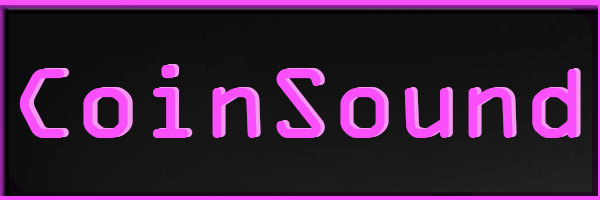
<style>
.page{position:relative;width:600px;height:200px}
.page>*{position:absolute;margin:0}
.t1{font:106px "OCRAExtended";color:#f950fb}
.t2{font:106px "OCRAExtended"}
</style>
<div class="page">
<p class="t1" style="left:19px;top:65px;width:558px;height:73px">CoinSound</p>
<p class="t2" style="left:24px;top:64px;width:557px;height:73px">CoinSound</p>
</div>
